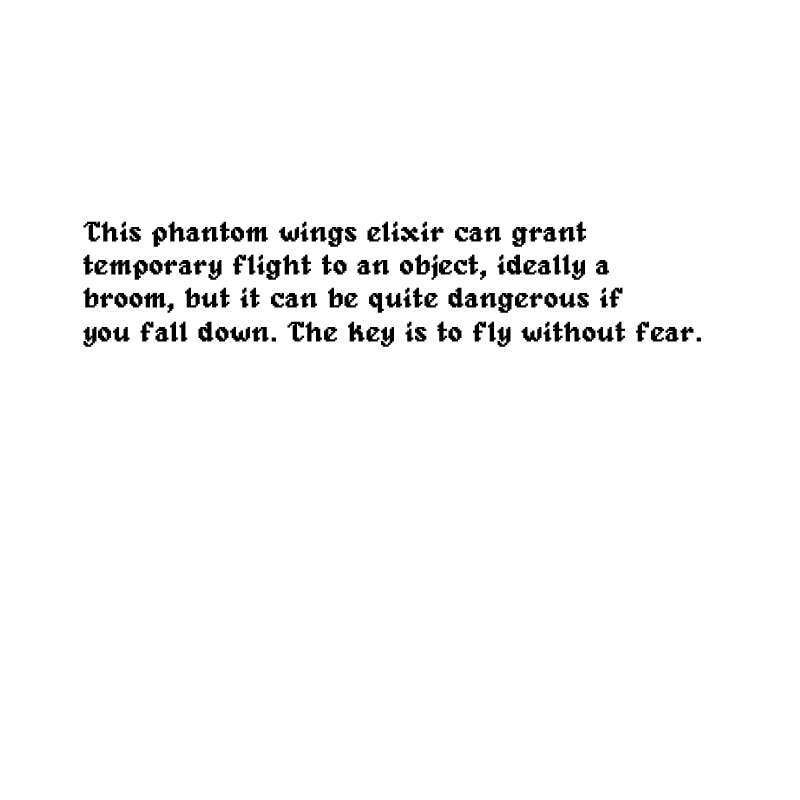
<style>
.page{position:relative;width:800px;height:800px;background:#ffffff}
.page>*{position:absolute;margin:0}
.t1{font:27.9px "Alagard";color:#000000;font-weight:bold}
</style>
<div class="page">
<p class="t1" style="left:83px;top:221px;width:618px;height:126px">This phantom wings elixir can grant <br>temporary flight to an object, ideally a <br>broom, but it can be quite dangerous if <br>you fall down. The key is to fly without fear.</p>
</div>
